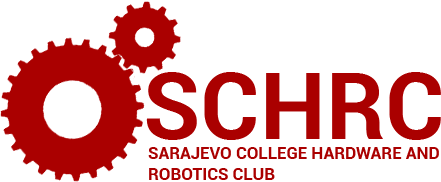
<style>
.page{position:relative;width:441px;height:182px;background:#ffffff}
.page>*{position:absolute;margin:0}
.t1{font:93px "Roboto-Bold";color:#aa0000}
.t2{font:16.9px "Roboto-Bold";color:#aa0000}
</style>
<div class="page">
<p class="t1" style="left:146px;top:72px;width:295px;height:68px">SCHRC</p>
<p class="t2" style="left:148px;top:147px;width:291px;height:33px">SARAJEVO COLLEGE HARDWARE AND <br>ROBOTICS CLUB</p>
</div>
